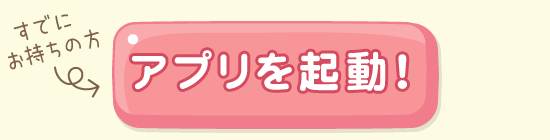
<style>
.page{position:relative;width:550px;height:140px;background:#fdfbe1}
.page>*{position:absolute;margin:0}
.t1{font:23px "uzura_font";color:#7e634c;scale:0.95 1}
.t2{font:43px "DFMaruGothic-SB-WINP-RKSJ-H";letter-spacing:0.05em;color:#ffffff;scale:0.95 1}
</style>
<div class="page">
<p class="t1" style="left:8px;top:14px;width:91px;height:56px;text-align:center;rotate:-15deg">すでに<br>お持ちの方</p>
<p class="t2" style="left:131px;top:50px;width:276px;height:41px">アプリを起動！</p>
</div>
